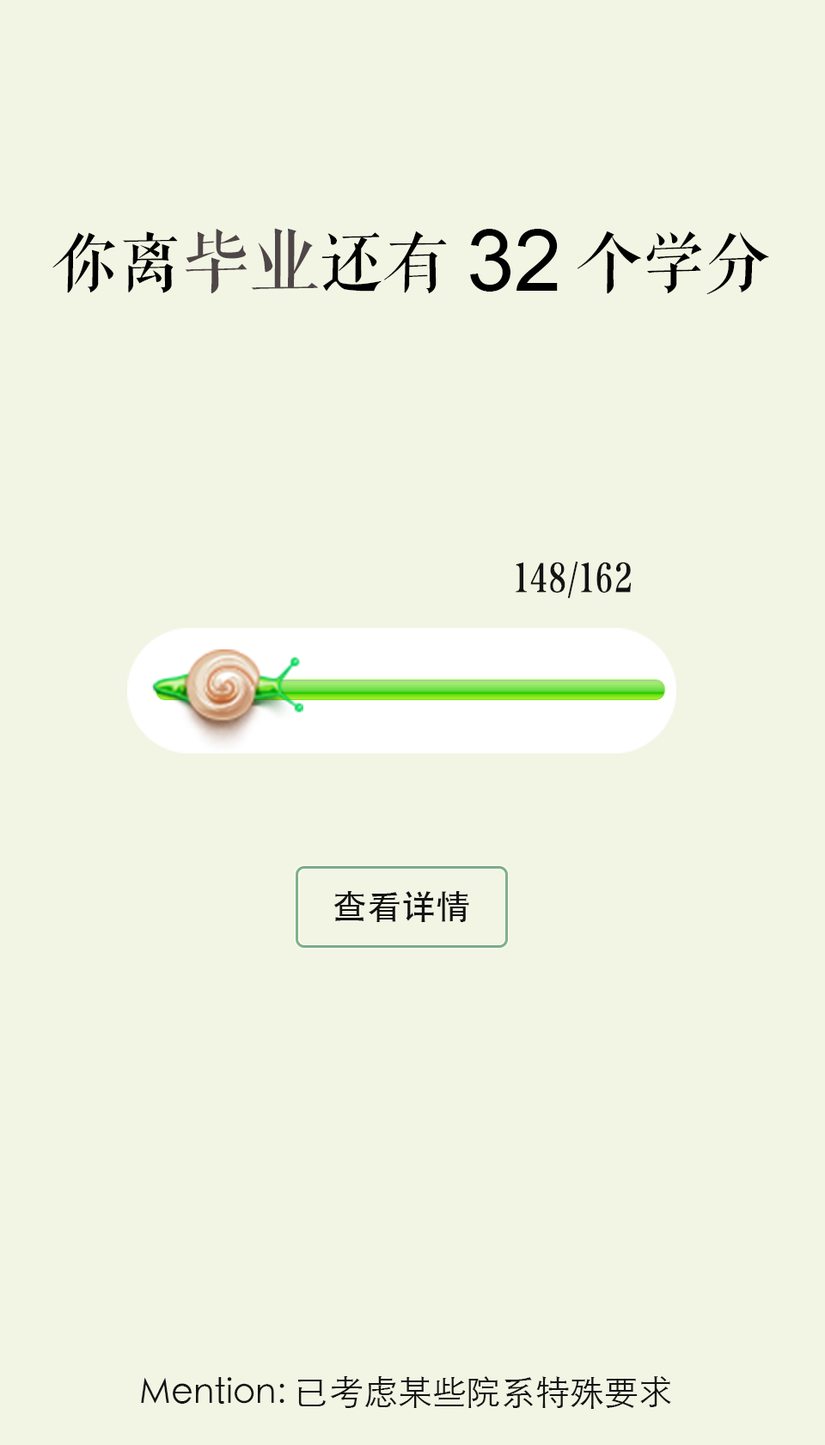
<style>
.page{position:relative;width:825px;height:1445px;background:#f2f4e4}
.page>*{position:absolute;margin:0}
.t1{font:64.5px "FZQKBYSJW--GB1-0";color:#000000}
.t2{font:68.8px "FZQKBYSJW--GB1-0";color:#4f4747}
.t3{font:86px "ArialMT";color:#000000}
.t4{font:43px "FZQKBYSJW--GB1-0";color:#121413}
.t5{font:34.4px "STHeitiSC-Medium";color:#121413}
.t6{font:34.4px "STHeitiSC-Light";color:#121413}
</style>
<div class="page">
<p class="t1" style="left:52px;top:228px;width:718px;height:66px">你离<span class="t2">毕业</span>还有        个学分</p>
<p class="t3" style="left:470px;top:229px;width:88px;height:62px">32</p>
<p class="t4" style="left:516px;top:561px;width:115px;height:37px">148/162</p>
<p class="t5" style="left:334px;top:891px;width:135px;height:31px">查看详情</p>
<p class="t6" style="left:141px;top:1376px;width:531px;height:32px">Mention:已考虑某些院系特殊要求</p>
</div>
